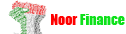
<style>
.page{position:relative;width:126px;height:34px;background:#ffffff}
.page>*{position:absolute;margin:0}
.t1{font:14px "Impact";color:#0de11a}
.t2{font:14px "Impact";color:#ff0000}
</style>
<div class="page">
<p class="t1" style="left:51px;top:14px;width:74px;height:11px"><span class="t2">Noor </span>Finance</p>
</div>
